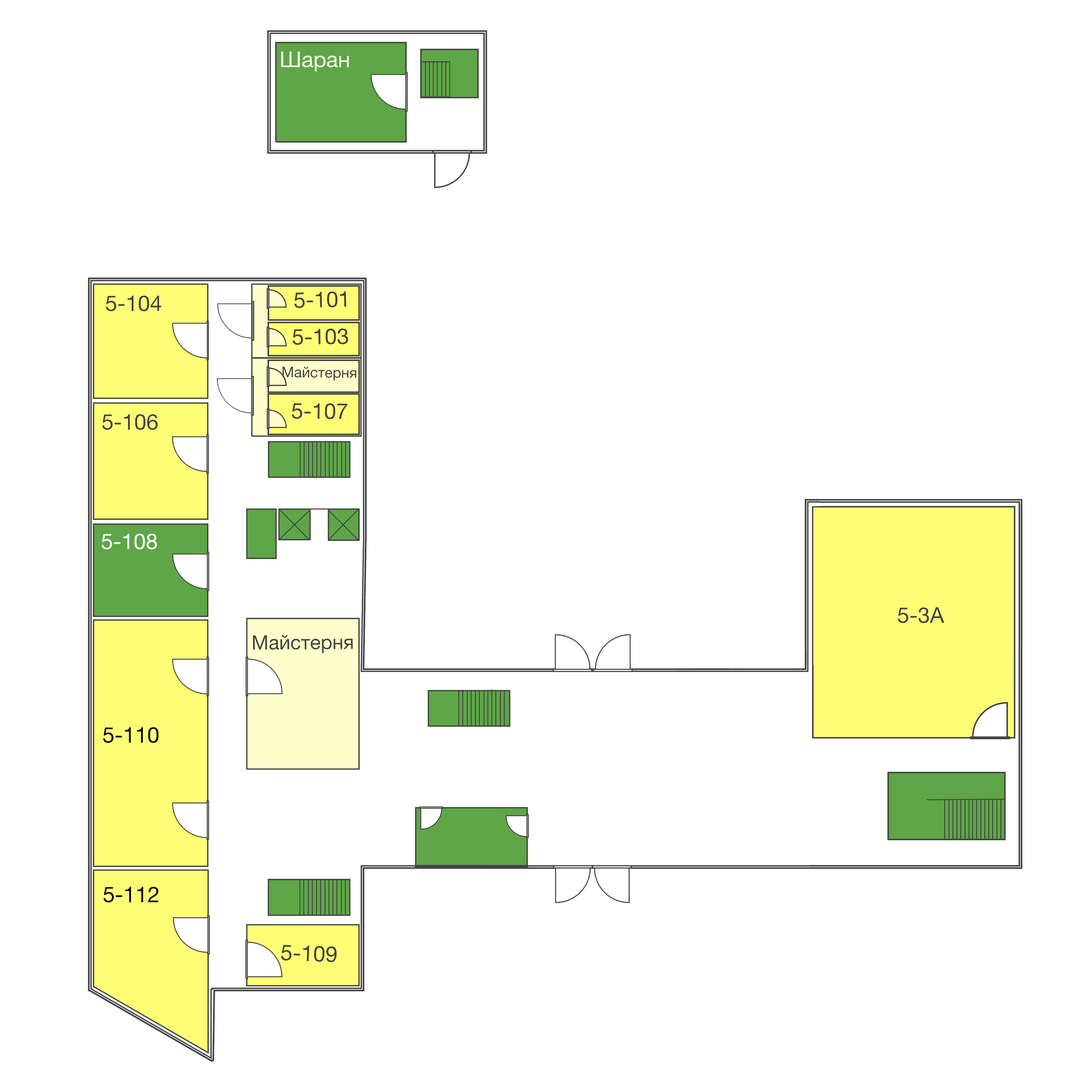
<style>
.page{position:relative;width:1092px;height:1092px;background:#ffffff}
.page>*{position:absolute;margin:0}
.t1{font:21.7px "HelveticaNeue";color:#f8f7eb}
.t2{font:21.9px "HelveticaNeue";color:#434343}
.t3{font:21.7px "HelveticaNeue";color:#434343}
.t4{font:21.8px "HelveticaNeue";color:#434343}
.t5{font:14.6px "HelveticaNeue";color:#434343}
.t6{font:22px "HelveticaNeue";color:#434343}
.t7{font:21.7px "HelveticaNeue";color:#ffffff}
.t8{font:19.7px "HelveticaNeue";color:#434343}
.t9{font:21.7px "HelveticaNeue";color:#000000}
</style>
<div class="page">
<p class="t1" style="left:281px;top:52px;width:68px;height:20px">Шаран</p>
<p class="t2" style="left:294px;top:291px;width:52px;height:17px;rotate:-1deg">5-101</p>
<p class="t3" style="left:106px;top:295px;width:55px;height:16px">5-104</p>
<p class="t4" style="left:292px;top:329px;width:56px;height:16px;rotate:-1deg">5-103</p>
<p class="t5" style="left:282px;top:366px;width:74px;height:15px;rotate:1deg">Майстерня</p>
<p class="t6" style="left:292px;top:403px;width:55px;height:16px">5-107</p>
<p class="t3" style="left:102px;top:414px;width:56px;height:16px">5-106</p>
<p class="t7" style="left:102px;top:534px;width:55px;height:15px">5-108</p>
<p class="t3" style="left:898px;top:607px;width:46px;height:16px">5-3А</p>
<p class="t8" style="left:253px;top:635px;width:100px;height:18px">Майстерня</p>
<p class="t9" style="left:103px;top:727px;width:56px;height:16px">5-110</p>
<p class="t9" style="left:103px;top:887px;width:55px;height:15px">5-112</p>
<p class="t2" style="left:281px;top:945px;width:56px;height:17px;rotate:2deg">5-109</p>
</div>
